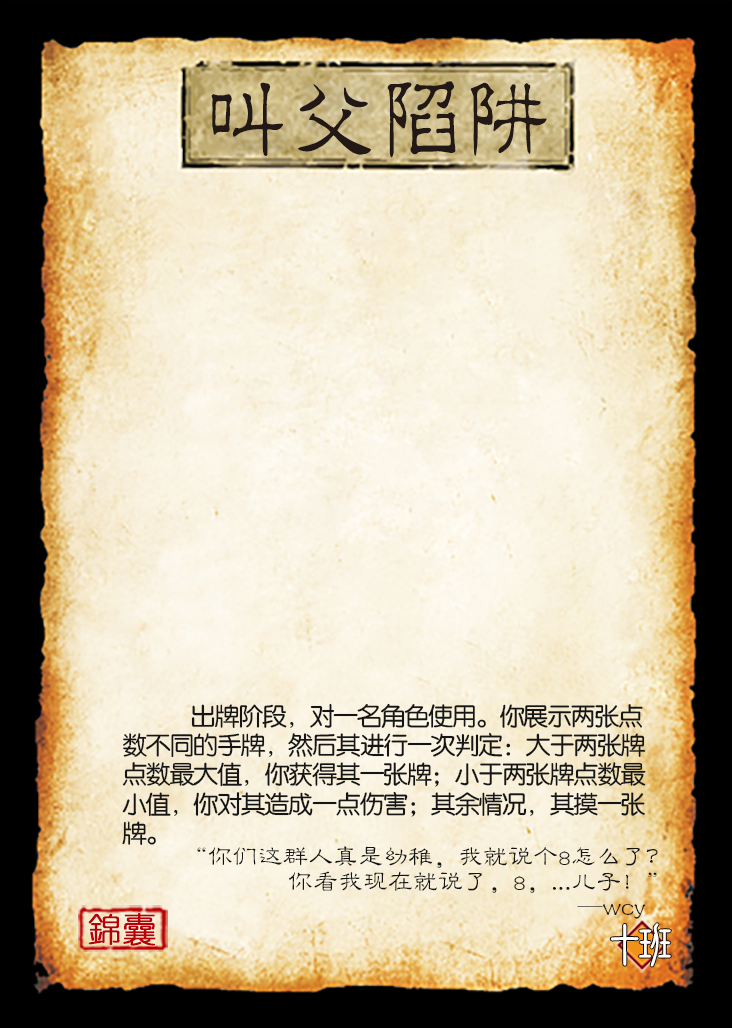
<style>
.page{position:relative;width:732px;height:1028px}
.page>*{position:absolute;margin:0}
.t1{font:91.7px "JMFLS_GBK";color:#221815;scale:0.95 1}
.t2{font:25px/29.2px "FZY3JW--GB1-0";letter-spacing:-0.05em;color:#151515}
.t3{font:25px/25px "FZLBJW--GB1-0";color:#151515}
.t4{font:33.3px "YouYuan";color:#ba0007;font-weight:bold}
.t5{font:50px "DFNewChuan-W5-WINP-BF";letter-spacing:-0.4em;color:#ffffff}
</style>
<div class="page">
<p class="t1" style="left:211px;top:81px;width:336px;height:77px">叫父陷阱</p>
<p class="t2" style="left:122px;top:703px;width:524px;height:142px">出牌阶段，对一名角色使用。你展示两张点数不同的手牌，然后其进行一次判定：大于两张牌点数最大值，你获得其一张牌；小于两张牌点数最小值，你对其造成一点伤害；其余情况，其摸一张牌。</p>
<p class="t3" style="left:197px;top:846px;width:461px;height:73px;text-align:right">“你们这群人真是幼稚，我就说个8怎么了？<br>你看我现在就说了，8，...儿子！”<br>                                      —wcy</p>
<p class="t4" style="left:88px;top:913px;width:68px;height:33px">錦囊</p>
<p class="t5" style="left:611px;top:923px;width:60px;height:44px">十班</p>
</div>
